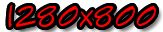
<style>
.page{position:relative;width:163px;height:32px;background:#000000}
.page>*{position:absolute;margin:0}
.t1{font:33.3px "SketchFlowPrint";color:#ff0000}
</style>
<div class="page">
<p class="t1" style="left:8px;top:5px;width:148px;height:22px">1280x800</p>
<p class="t1" style="left:8px;top:5px;width:148px;height:22px">1280x800</p>
</div>
